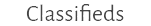
<style>
.page{position:relative;width:151px;height:26px;background:#ffffff}
.page>*{position:absolute;margin:0}
.t1{font:24px "AlegreyaSans-Regular";color:#464646}
</style>
<div class="page">
<p class="t1" style="left:26px;top:4px;width:98px;height:17px">Classifieds</p>
</div>
